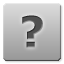
<style>
.page{position:relative;width:64px;height:64px}
.page>*{position:absolute;margin:0}
.t1{font:43px "Tahoma-Bold";letter-spacing:0.05em;color:#515151}
</style>
<div class="page">
<p class="t1" style="left:22px;top:15px;width:21px;height:33px">?</p>
</div>
